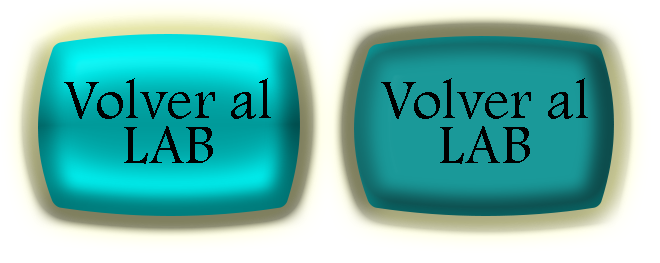
<style>
.page{position:relative;width:660px;height:263px}
.page>*{position:absolute;margin:0}
.t1{font:58.2px "FootlightMTLight";color:#000000}
.t2{font:58.3px "FootlightMTLight";color:#000000}
</style>
<div class="page">
<p class="t1" style="left:64px;top:78px;width:207px;height:41px">Volver al</p>
<p class="t2" style="left:381px;top:78px;width:207px;height:41px">Volver al</p>
<p class="t1" style="left:124px;top:126px;width:89px;height:38px">LAB</p>
<p class="t2" style="left:440px;top:126px;width:90px;height:38px">LAB</p>
</div>
